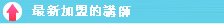
<style>
.page{position:relative;width:224px;height:24px}
.page>*{position:absolute;margin:0}
.t1{font:12px "MicrosoftYaHei";letter-spacing:0.1em;color:#fcfcfc;font-weight:bold}
</style>
<div class="page">
<p class="t1" style="left:32px;top:5px;width:99px;height:12px">最新加盟的講師</p>
</div>
